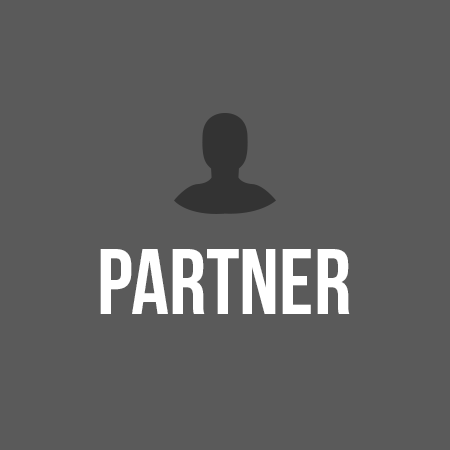
<style>
.page{position:relative;width:450px;height:450px;background:#5a5a5a}
.page>*{position:absolute;margin:0}
.t1{font:93.3px "BebasNeueBold";color:#ffffff}
</style>
<div class="page">
<p class="t1" style="left:100px;top:249px;width:250px;height:65px">partner</p>
</div>
